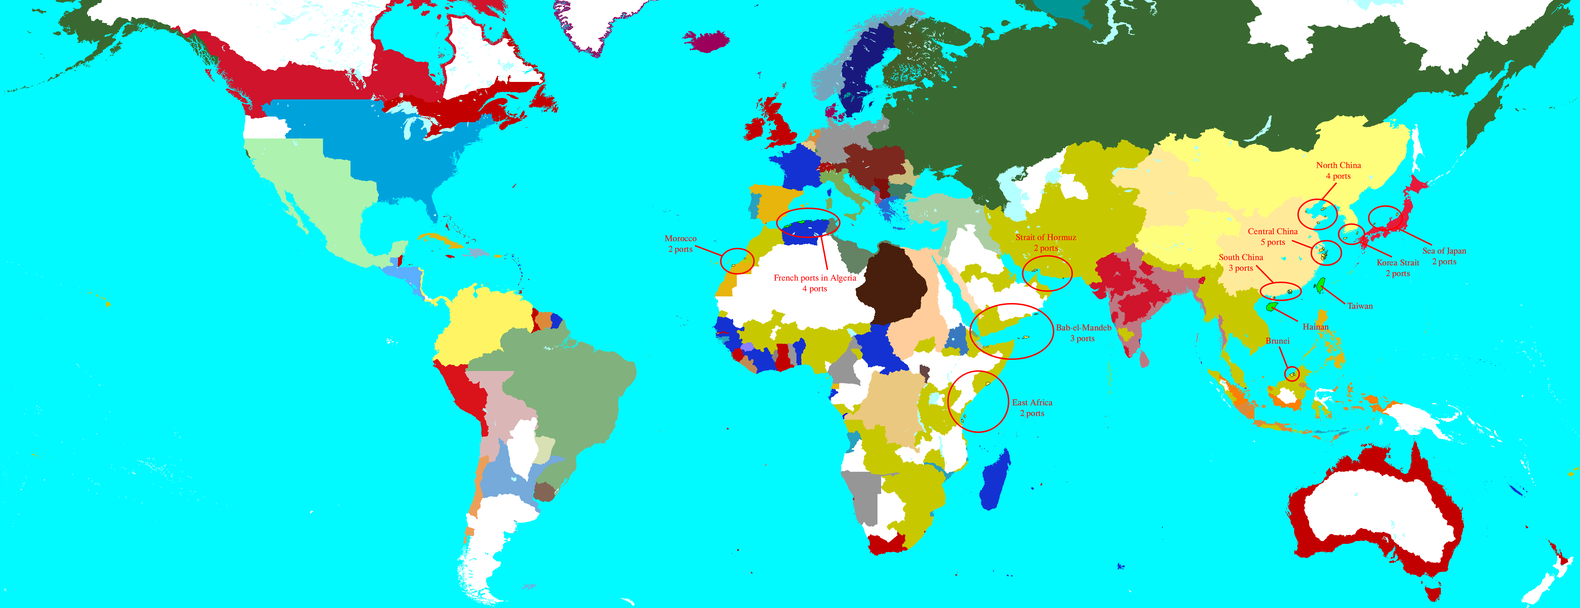
<style>
.page{position:relative;width:1580px;height:608px;background:#00faff}
.page>*{position:absolute;margin:0}
.t1{font:9px "HappyTimesattheIKOB-Regular";color:#ff0000}
</style>
<div class="page">
<p class="t1" style="left:1316px;top:162px;width:45px;height:19px;text-align:center">North China<br>4 ports</p>
<p class="t1" style="left:1016px;top:234px;width:60px;height:19px;text-align:center">Strait of Hormuz<br>2 ports</p>
<p class="t1" style="left:1248px;top:228px;width:50px;height:19px;text-align:center">Central China<br>5 ports</p>
<p class="t1" style="left:665px;top:235px;width:31px;height:19px;text-align:center">Morocco<br>2 ports</p>
<p class="t1" style="left:1219px;top:254px;width:44px;height:19px;text-align:center">South China<br>3 ports</p>
<p class="t1" style="left:1423px;top:247px;width:43px;height:19px;text-align:center">Sea of Japan<br>2 ports</p>
<p class="t1" style="left:1376px;top:259px;width:43px;height:19px;text-align:center">Korea Strait<br>2 ports</p>
<p class="t1" style="left:774px;top:274px;width:82px;height:19px;text-align:center">French ports in Algeria<br>4 ports</p>
<p class="t1" style="left:1347px;top:302px;width:25px;height:7px">Taiwan</p>
<p class="t1" style="left:1056px;top:324px;width:55px;height:19px;text-align:center">Bab-el-Mandeb<br>3 ports</p>
<p class="t1" style="left:1302px;top:323px;width:26px;height:7px">Hainan</p>
<p class="t1" style="left:1265px;top:337px;width:24px;height:7px">Brunei</p>
<p class="t1" style="left:1012px;top:399px;width:40px;height:19px;text-align:center">East Africa<br>2 ports</p>
</div>
